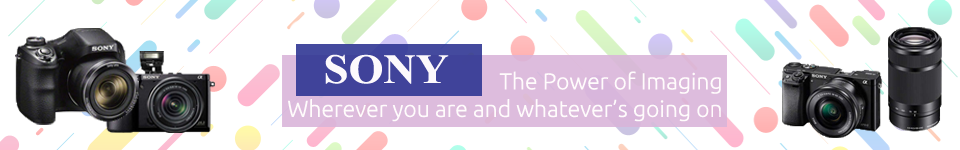
<style>
.page{position:relative;width:960px;height:150px;background:#ffffff}
.page>*{position:absolute;margin:0}
.t1{font:41.7px "TimesNewRomanPS-BoldMT";color:#fcf9fc;scale:1.08 1}
.t2{font:22.9px "Ubuntu-Light";color:#fffcfc}
</style>
<div class="page">
<p class="t1" style="left:325px;top:54px;width:124px;height:30px">SONY</p>
<p class="t2" style="left:288px;top:71px;width:433px;height:51px;text-align:right">The Power of Imaging<br>Wherever you are and whatever’s going on</p>
</div>
